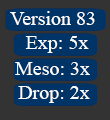
<style>
.page{position:relative;width:110px;height:120px;background:#003366}
.page>*{position:absolute;margin:0}
.t1{font:20px "TimesNewRomanPSMT";color:#ffffff}
</style>
<div class="page">
<p class="t1" style="left:10px;top:11px;width:85px;height:14px">Version 83</p>
<p class="t1" style="left:25px;top:36px;width:64px;height:17px">Exp: 5x</p>
<p class="t1" style="left:15px;top:62px;width:75px;height:13px">Meso: 3x</p>
<p class="t1" style="left:18px;top:86px;width:72px;height:17px">Drop: 2x</p>
</div>
